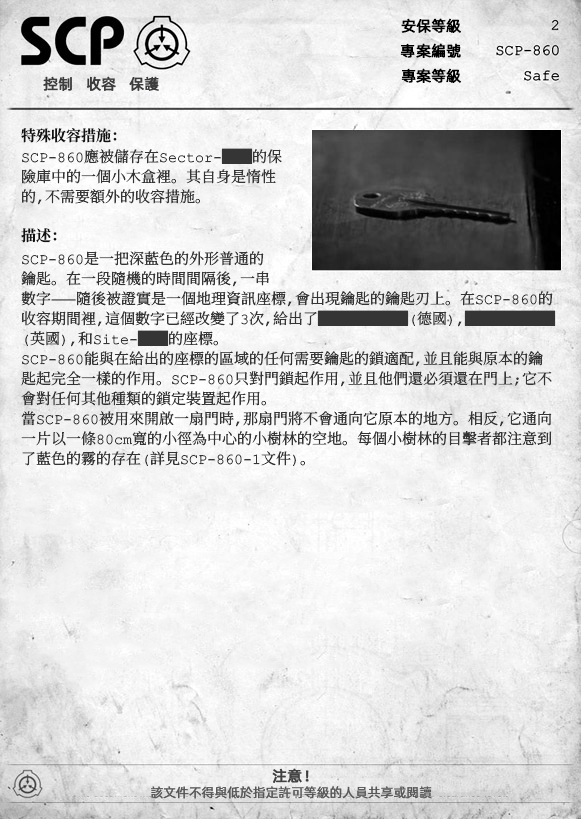
<style>
.page{position:relative;width:581px;height:819px}
.page>*{position:absolute;margin:0}
.t1{font:15px "AlibabaPuHuiTiR";color:#000000;font-weight:bold}
.t2{font:15px "AlibabaPuHuiTiR";color:#3d3d3d;font-weight:bold}
.t3{font:15px "ContainmentBreach-Bold";color:#121212}
.t4{font:15px/20px "ContainmentBreach-Regular";color:#353535}
.t5{font:15px "AlibabaPuHuiTiR";color:#414141;font-weight:bold}
.t6{font:13px "AlibabaPuHuiTiR";color:#575757}
</style>
<div class="page">
<p class="t1" style="left:401px;top:18px;width:60px;height:15px">安保等級</p>
<p class="t1" style="left:400px;top:43px;width:61px;height:15px">專案編號</p>
<p class="t2" style="left:43px;top:76px;width:116px;height:15px">控制   收容   保護</p>
<p class="t1" style="left:401px;top:68px;width:60px;height:15px">專案等級</p>
<p class="t3" style="left:21px;top:128px;width:96px;height:15px">特殊收容措施：</p>
<p class="t4" style="left:22px;top:148px;width:260px;height:57px">SCP-860應被儲存在Sector-██的保<br>險庫中的一個小木盒裡。其自身是惰性<br>的，不需要額外的收容措施。</p>
<p class="t3" style="left:21px;top:228px;width:36px;height:15px">描述：</p>
<p class="t4" style="left:21px;top:251px;width:535px;height:215px">SCP-860是一把深藍色的外形普通的<br>鑰匙。在一段隨機的時間間隔後，一串<br>數字——隨後被證實是一個地理資訊座標，會出現鑰匙的鑰匙刃上。在SCP-860的<br>收容期間裡，這個數字已經改變了3次，給出了██████（德國），██████<br>（英國），和Site-██的座標。<br>SCP-860能與在給出的座標的區域的任何需要鑰匙的鎖適配，並且能與原本的鑰<br>匙起完全一樣的作用。SCP-860只對門鎖起作用，並且他們還必須還在門上；它不<br>會對任何其他種類的鎖定裝置起作用。<br>當SCP-860被用來開啟一扇門時，那扇門將不會通向它原本的地方。相反，它通向<br>一片以一條80cm寬的小徑為中心的小樹林的空地。每個小樹林的目擊者都注意到<br>了藍色的霧的存在（詳見SCP-860-1文件）。</p>
<p class="t5" style="left:272px;top:768px;width:37px;height:15px">注意！</p>
<p class="t6" style="left:151px;top:786px;width:281px;height:13px">該文件不得與低於指定許可等級的人員共享或閱讀</p>
</div>
